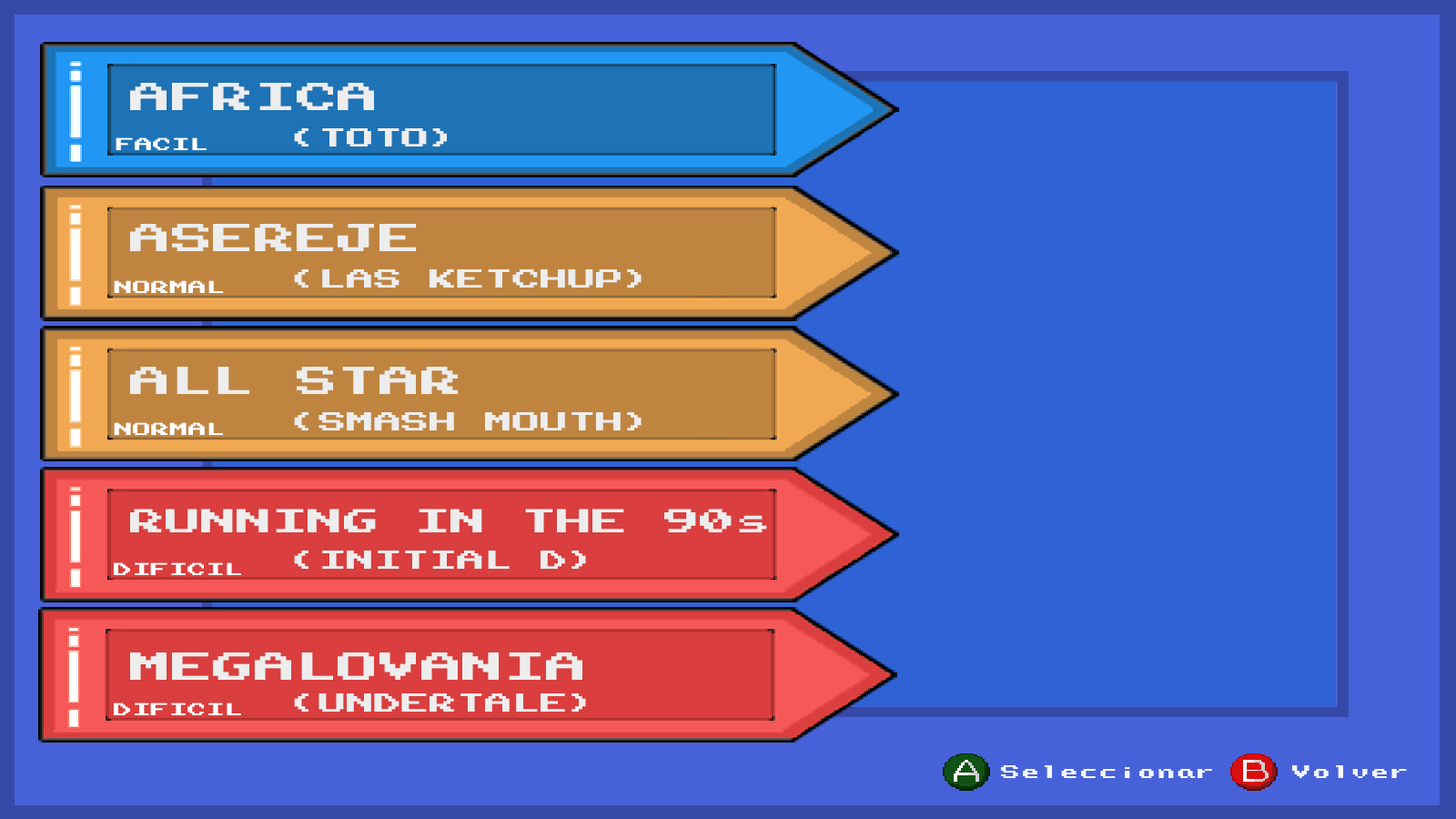
<style>
.page{position:relative;width:1456px;height:819px;background:#2f62d4}
.page>*{position:absolute;margin:0}
.t1{font:31.2px "NES-Chimera";color:#ededed;scale:1.33 1}
.t2{font:13.9px "NES-Chimera";color:#ffffff;scale:1.33 1}
.t3{font:20.8px "NES-Chimera";color:#ededed;scale:1.33 1}
.t4{font:26.7px "NES-Chimera";color:#ededed;scale:1.33 1}
.t5{font:14.6px "NES-Chimera";color:#f4f6ff;scale:1.33 1}
</style>
<div class="page">
<p class="t1" style="left:130px;top:83px;width:244px;height:27px">AFRICA</p>
<p class="t2" style="left:116px;top:137px;width:91px;height:13px">FACIL</p>
<p class="t3" style="left:294px;top:128px;width:153px;height:19px">(TOTO)</p>
<p class="t1" style="left:130px;top:224px;width:286px;height:27px">ASEREJE</p>
<p class="t3" style="left:294px;top:269px;width:348px;height:19px">(LAS KETCHUP)</p>
<p class="t2" style="left:114px;top:280px;width:109px;height:13px">NORMAL</p>
<p class="t1" style="left:130px;top:367px;width:328px;height:27px">ALL STAR</p>
<p class="t3" style="left:294px;top:412px;width:348px;height:18px">(SMASH MOUTH)</p>
<p class="t2" style="left:114px;top:422px;width:109px;height:13px">NORMAL</p>
<p class="t4" style="left:130px;top:509px;width:637px;height:23px">RUNNING IN THE 90s</p>
<p class="t3" style="left:294px;top:551px;width:292px;height:18px">(INITIAL D)</p>
<p class="t2" style="left:114px;top:562px;width:127px;height:13px">DIFICIL</p>
<p class="t1" style="left:130px;top:652px;width:452px;height:28px">MEGALOVANIA</p>
<p class="t3" style="left:294px;top:693px;width:292px;height:19px">(UNDERTALE)</p>
<p class="t2" style="left:114px;top:703px;width:127px;height:12px">DIFICIL</p>
<p class="t5" style="left:1001px;top:765px;width:211px;height:13px">Seleccionar</p>
<p class="t5" style="left:1292px;top:765px;width:115px;height:13px">Volver</p>
</div>
